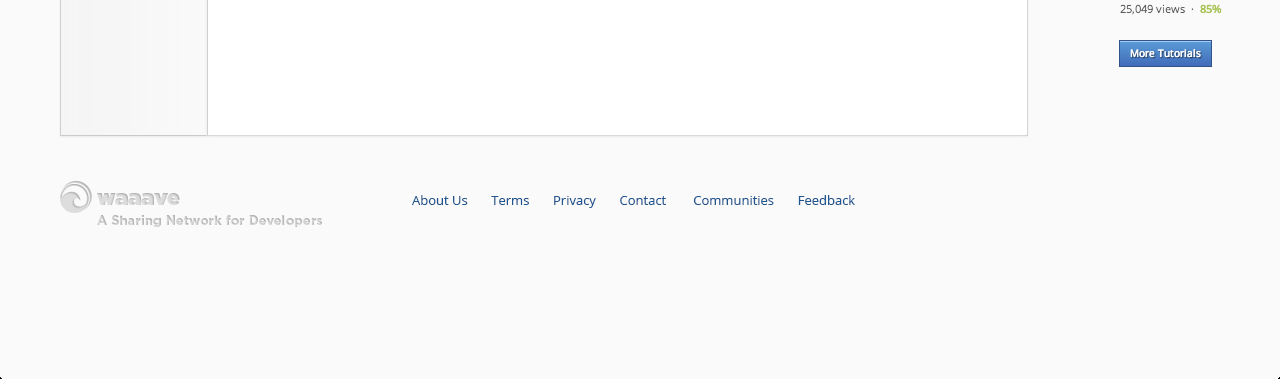
<style>
.page{position:relative;width:1280px;height:379px;background:#fafafa}
.page>*{position:absolute;margin:0}
.t1{font:22px "Gotham-Ultra";color:#dddddd}
.t2{font:13px "OpenSans";color:#1f5691}
.t3{font:13px "Gotham-Bold";color:#dddddd}
</style>
<div class="page">
<p class="t1" style="left:97px;top:193px;width:83px;height:12px">waaave</p>
<p class="t2" style="left:412px;top:195px;width:443px;height:13px">About Us       Terms       Privacy       Contact        Communities       Feedback</p>
<p class="t3" style="left:97px;top:215px;width:225px;height:12px">A Sharing Network for Developers</p>
</div>
